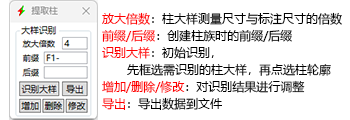
<style>
.page{position:relative;width:350px;height:120px;background:#ffffff}
.page>*{position:absolute;margin:0}
.t1{font:12px/17px "MicrosoftYaHei";color:#000000}
.t2{font:12px/17px "MicrosoftYaHei";color:#ff0000}
</style>
<div class="page">
<p class="t1" style="left:102px;top:12px;width:240px;height:98px"><span class="t2">放大倍数</span>：柱大样测量尺寸与标注尺寸的倍数<br><span class="t2">前缀/后缀</span>：创建柱族时的前缀/后缀<br><span class="t2">识别大样</span>：初始识别，<br>       先框选需识别的柱大样，再点选柱轮廓<br><span class="t2">增加/删除/修改</span>：对识别结果进行调整<br><span class="t2">导出</span>：导出数据到文件</p>
</div>
